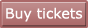
<style>
.page{position:relative;width:88px;height:28px}
.page>*{position:absolute;margin:0}
.t1{font:14px "Verdana";color:#ffffff}
</style>
<div class="page">
<p class="t1" style="left:6px;top:7px;width:77px;height:15px">Buy tickets</p>
</div>
